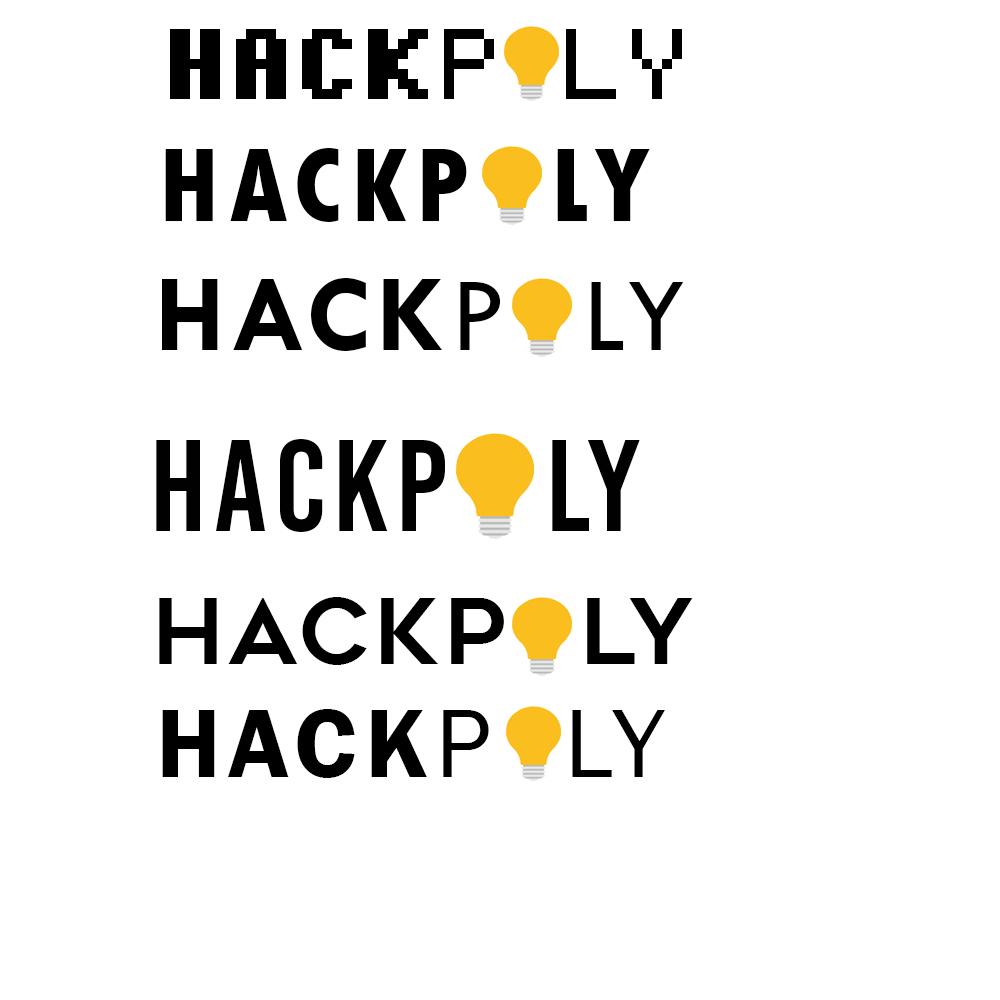
<style>
.page{position:relative;width:1000px;height:1000px;background:#ffffff}
.page>*{position:absolute;margin:0}
.t1{font:80px "pixelmix-bold";letter-spacing:0.075em;color:#000000}
.t2{font:80px "pixelmix";letter-spacing:0.075em;color:#000000}
.t3{font:110px "TwCenMT-CondensedExtraBold";letter-spacing:0.075em;color:#000000}
.t4{font:110px "TwCenMT-Regular";letter-spacing:0.05em;color:#000000}
.t5{font:110px "TwCenMT-Bold";letter-spacing:0.05em;color:#000000}
.t6{font:130px "BebasKai";letter-spacing:0.05em;color:#000100}
.t7{font:90px "Geometos";letter-spacing:0.05em;color:#000000}
.t8{font:100px "FranklinGothic-Book";letter-spacing:0.075em;color:#000000}
.t9{font:100px "FranklinGothic-Demi";letter-spacing:0.075em;color:#000000}
</style>
<div class="page">
<p class="t1" style="left:170px;top:29px;width:512px;height:70px">HACK<span class="t2">P LY</span></p>
<p class="t3" style="left:165px;top:148px;width:485px;height:74px">HACKP  LY</p>
<p class="t4" style="left:162px;top:278px;width:522px;height:73px"><span class="t5">HACK</span>P  LY</p>
<p class="t6" style="left:156px;top:439px;width:484px;height:93px">HACKP   LY</p>
<p class="t7" style="left:159px;top:597px;width:534px;height:68px">HACKP  LY</p>
<p class="t8" style="left:162px;top:709px;width:503px;height:69px"><span class="t9">HACK</span>P  LY</p>
</div>
